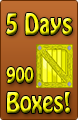
<style>
.page{position:relative;width:78px;height:120px}
.page>*{position:absolute;margin:0}
.t1{font:26.4px "HoboStd";scale:0.83 1}
.t2{font:25.2px "HoboStd";scale:0.83 1}
.t3{font:19.2px "HoboStd";scale:0.83 1}
</style>
<div class="page">
<p class="t1" style="left:6px;top:13px;width:66px;height:22px">5 Days</p>
<p class="t2" style="left:6px;top:67px;width:64px;height:46px"><span class="t3">900 <br></span>Boxes!</p>
</div>
